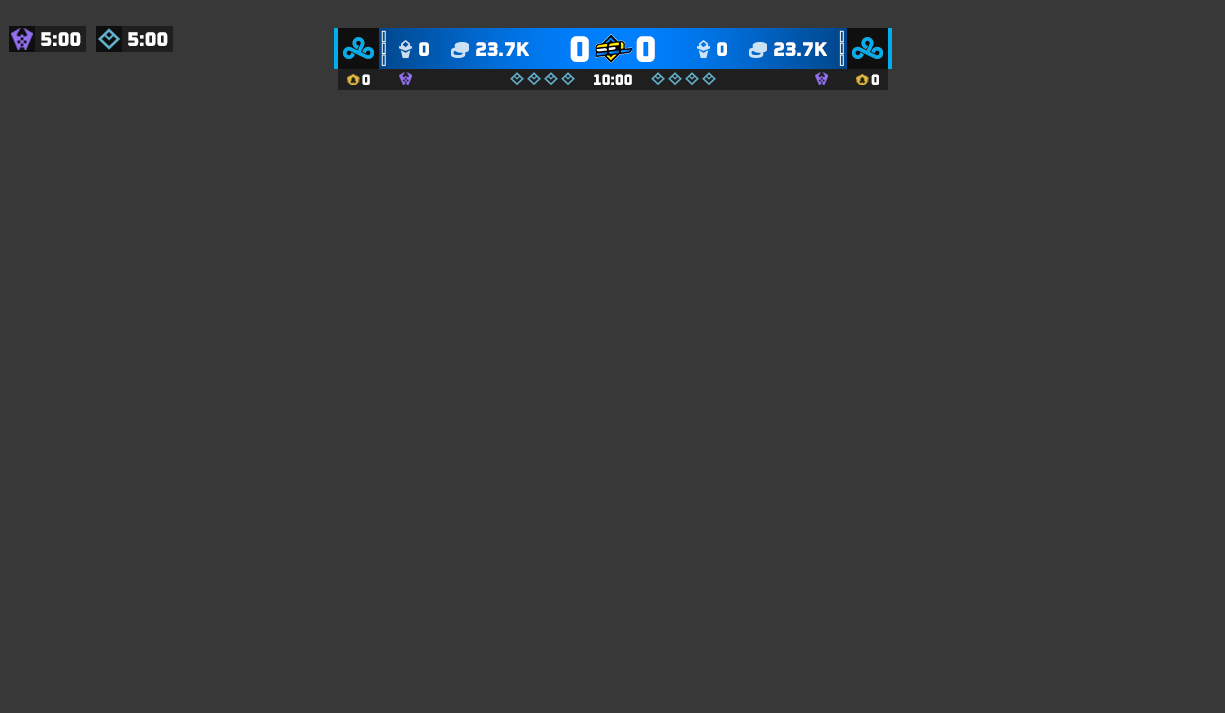
<style>
.page{position:relative;width:1225px;height:713px;background:#383838}
.page>*{position:absolute;margin:0}
.t1{font:20px "Oxanium-ExtraBold";color:#ffffff;text-transform:uppercase}
.t2{font:37.3px "Oxanium-ExtraBold";color:#ffffff;text-transform:uppercase}
.t3{font:15.3px "Oxanium-ExtraBold";color:#ffffff;text-transform:uppercase}
</style>
<div class="page">
<p class="t1" style="left:41px;top:32px;width:40px;height:14px">5:00</p>
<p class="t1" style="left:128px;top:32px;width:40px;height:14px">5:00</p>
<p class="t2" style="left:570px;top:36px;width:19px;height:26px">0</p>
<p class="t2" style="left:636px;top:36px;width:19px;height:26px">0</p>
<p class="t1" style="left:419px;top:42px;width:10px;height:14px">0</p>
<p class="t1" style="left:476px;top:42px;width:53px;height:14px">23.7k</p>
<p class="t1" style="left:717px;top:42px;width:10px;height:14px">0</p>
<p class="t1" style="left:774px;top:42px;width:53px;height:14px">23.7k</p>
<p class="t3" style="left:362px;top:74px;width:8px;height:11px">0</p>
<p class="t3" style="left:594px;top:74px;width:38px;height:11px">10:00</p>
<p class="t3" style="left:871px;top:74px;width:8px;height:11px">0</p>
</div>
